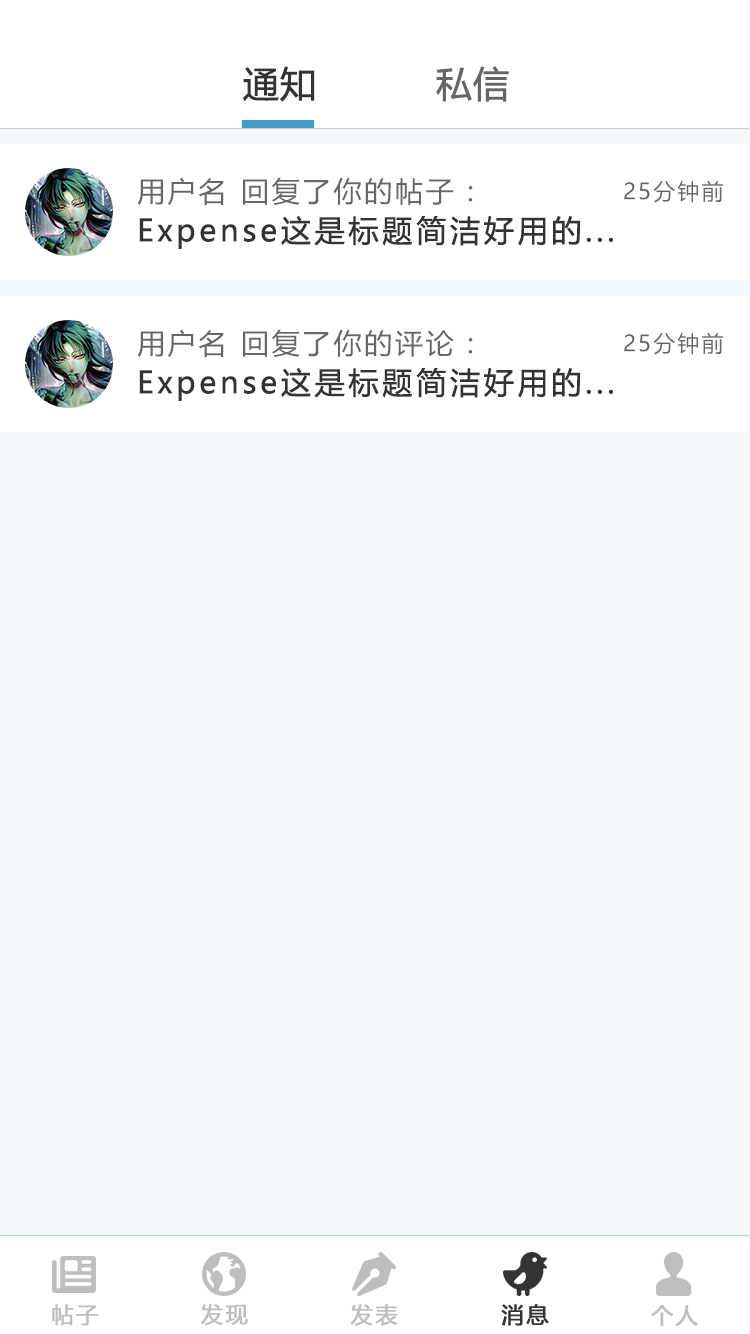
<style>
.page{position:relative;width:750px;height:1334px;background:#f3f8fb}
.page>*{position:absolute;margin:0}
.t1{font:36px "MicrosoftYaHei";color:#333333;font-weight:bold}
.t2{font:36px "MicrosoftYaHei";color:#666666;font-weight:bold}
.t3{font:28px "MicrosoftYaHei";letter-spacing:0.1em;color:#666666}
.t4{font:22px "MicrosoftYaHei";letter-spacing:0.1em;color:#666666}
.t5{font:30px "MicrosoftYaHei";letter-spacing:0.1em;color:#333333;font-weight:bold}
.t6{font:22px "MicrosoftYaHei";letter-spacing:0.1em;color:#bebebe;font-weight:bold}
.t7{font:22px "MicrosoftYaHei";letter-spacing:0.1em;color:#35334a;font-weight:bold}
</style>
<div class="page">
<p class="t1" style="left:243px;top:66px;width:72px;height:36px">通知</p>
<p class="t2" style="left:436px;top:66px;width:73px;height:36px">私信</p>
<p class="t3" style="left:137px;top:177px;width:87px;height:29px">用户名</p>
<p class="t3" style="left:243px;top:177px;width:230px;height:28px">回复了你的帖子：</p>
<p class="t4" style="left:624px;top:180px;width:99px;height:23px">25分钟前</p>
<p class="t5" style="left:139px;top:216px;width:474px;height:33px">Expense这是标题简洁好用的...</p>
<p class="t3" style="left:137px;top:329px;width:87px;height:29px">用户名</p>
<p class="t3" style="left:243px;top:329px;width:230px;height:28px">回复了你的评论：</p>
<p class="t4" style="left:624px;top:332px;width:99px;height:23px">25分钟前</p>
<p class="t5" style="left:139px;top:368px;width:474px;height:33px">Expense这是标题简洁好用的...</p>
<p class="t6" style="left:52px;top:1304px;width:47px;height:22px">帖子</p>
<p class="t6" style="left:200px;top:1303px;width:48px;height:23px">发现</p>
<p class="t6" style="left:350px;top:1304px;width:48px;height:22px">发表</p>
<p class="t7" style="left:501px;top:1304px;width:48px;height:22px">消息</p>
<p class="t6" style="left:650px;top:1305px;width:48px;height:22px">个人</p>
</div>
